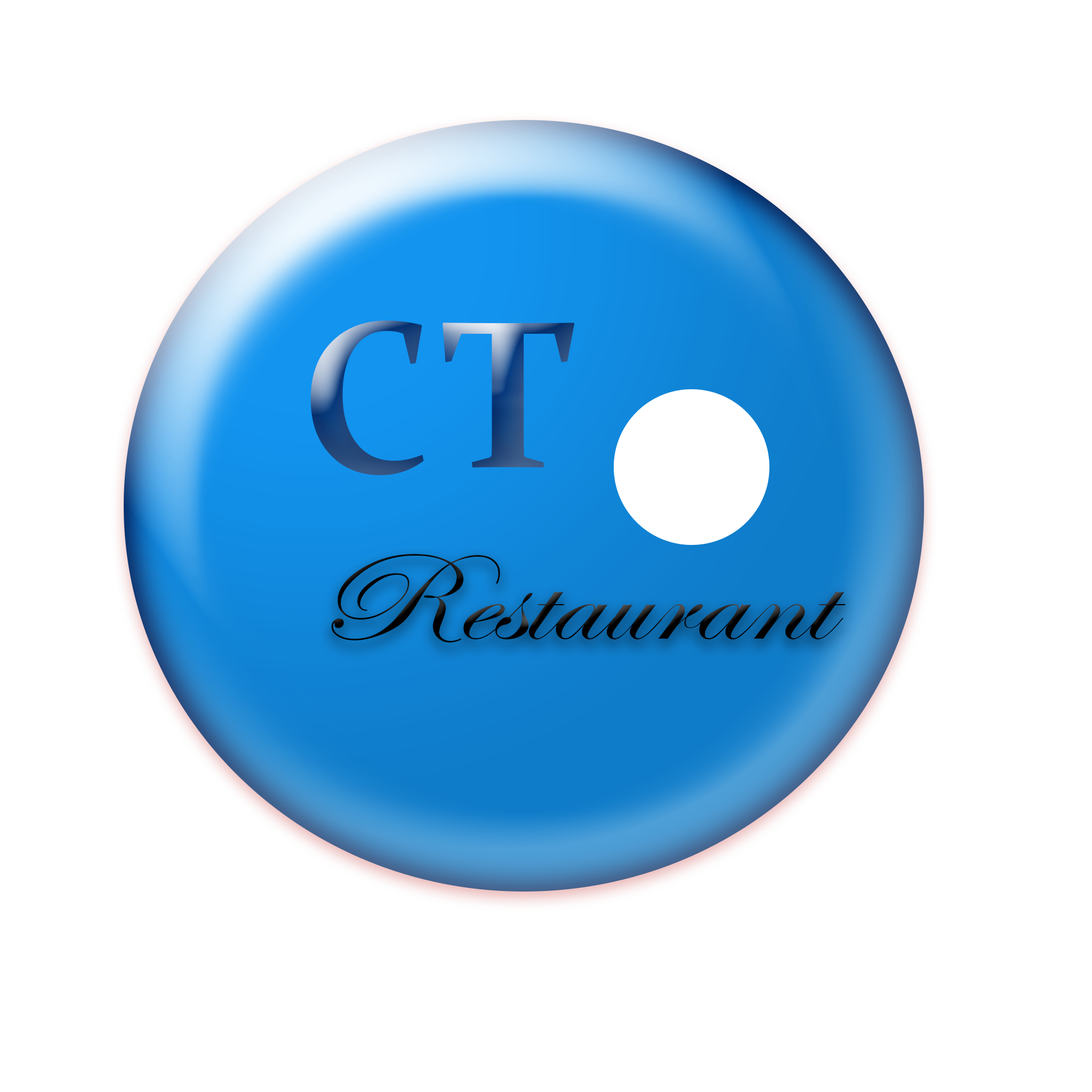
<style>
.page{position:relative;width:1092px;height:1092px;background:#ffffff}
.page>*{position:absolute;margin:0}
.t1{font:216.8px "Constantia-Bold";letter-spacing:0.26em;scale:0.9 1}
.t2{font:211.3px "Constantia-Bold";letter-spacing:0.26em;scale:1.03 1}
.t3{font:127.3px "EdwardianScriptITC";color:#000000;scale:1.2 1}
</style>
<div class="page">
<p class="t1" style="left:310px;top:320px;width:114px;height:156px">C</p>
<p class="t2" style="left:443px;top:323px;width:132px;height:145px">T</p>
<p class="t3" style="left:331px;top:554px;width:515px;height:89px">Restaurant</p>
</div>
